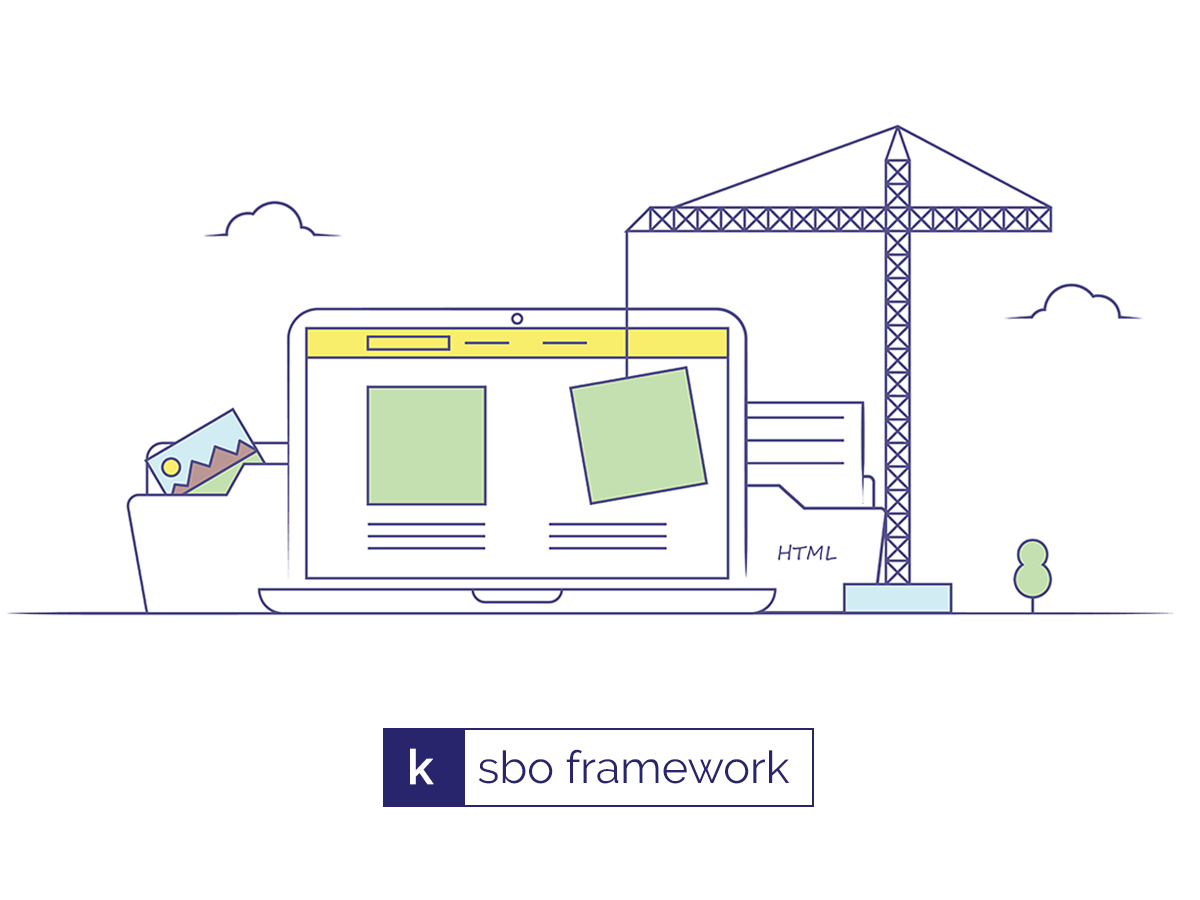
<style>
.page{position:relative;width:1200px;height:900px;background:#ffffff}
.page>*{position:absolute;margin:0}
.t1{font:48px "Raleway-SemiBold";color:#ffffff;font-weight:bold}
.t2{font:45px "Raleway-Regular";color:#29256d}
</style>
<div class="page">
<p class="t1" style="left:410px;top:748px;width:24px;height:37px">k</p>
<p class="t2" style="left:478px;top:749px;width:312px;height:35px">sbo framework</p>
</div>
